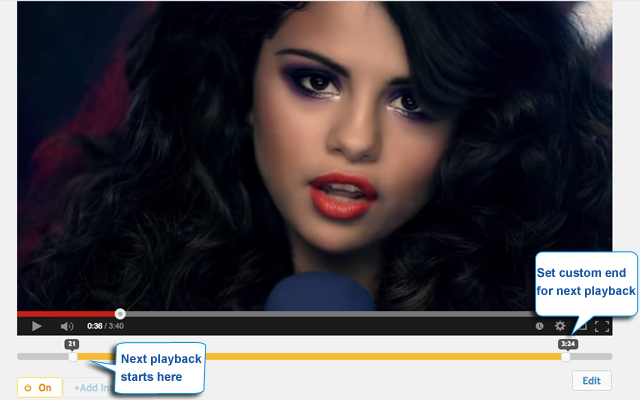
<style>
.page{position:relative;width:640px;height:400px}
.page>*{position:absolute;margin:0}
.t1{font:12px/18px "Arial-BoldMT";color:#1452a1}
</style>
<div class="page">
<p class="t1" style="left:536px;top:268px;width:100px;height:30px">Set custom end<br>for next playback</p>
<p class="t1" style="left:121px;top:354px;width:81px;height:27px">Next playback <br>starts here</p>
</div>
